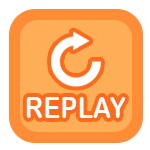
<style>
.page{position:relative;width:150px;height:150px;background:#ffae58}
.page>*{position:absolute;margin:0}
.t1{font:28.8px "ArialRoundedMTBold";letter-spacing:0.025em;color:#fffefe;scale:0.86 1}
</style>
<div class="page">
<p class="t1" style="left:26px;top:97px;width:100px;height:21px">REPLAY</p>
</div>
